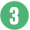
<style>
.page{position:relative;width:30px;height:30px;background:#4eb476}
.page>*{position:absolute;margin:0}
.t1{font:24px "BebasNeueBold";letter-spacing:-0.025em;color:#ffffff;font-weight:bold}
</style>
<div class="page">
<p class="t1" style="left:9px;top:7px;width:10px;height:18px">3</p>
</div>
